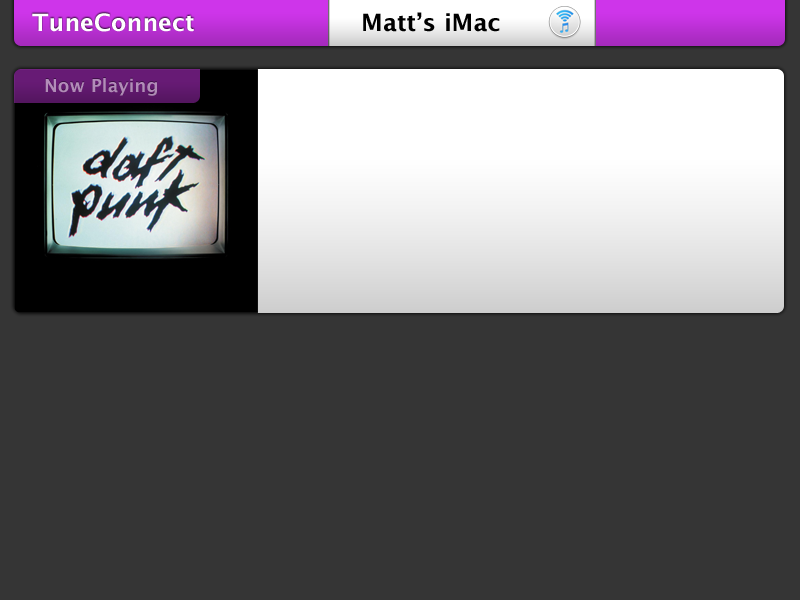
<style>
.page{position:relative;width:800px;height:600px;background:#353535}
.page>*{position:absolute;margin:0}
.t1{font:24px "LucidaGrande-Bold";color:#ffffff}
.t2{font:24px "LucidaGrande-Bold";color:#000000}
.t3{font:18px "LucidaGrande-Bold";color:#b18db8}
</style>
<div class="page">
<p class="t1" style="left:32px;top:13px;width:162px;height:19px">TuneConnect</p>
<p class="t2" style="left:363px;top:12px;width:137px;height:20px">Matt’s iMac</p>
<p class="t3" style="left:45px;top:78px;width:112px;height:18px">Now Playing</p>
</div>
